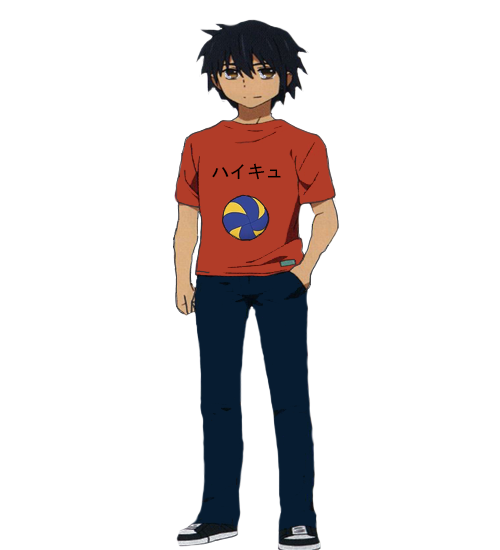
<style>
.page{position:relative;width:500px;height:550px;background:#ffffff}
.page>*{position:absolute;margin:0}
.t1{font:18px "MS-Gothic";color:#000000}
</style>
<div class="page">
<p class="t1" style="left:212px;top:163px;width:69px;height:17px">ハイキュ</p>
</div>
